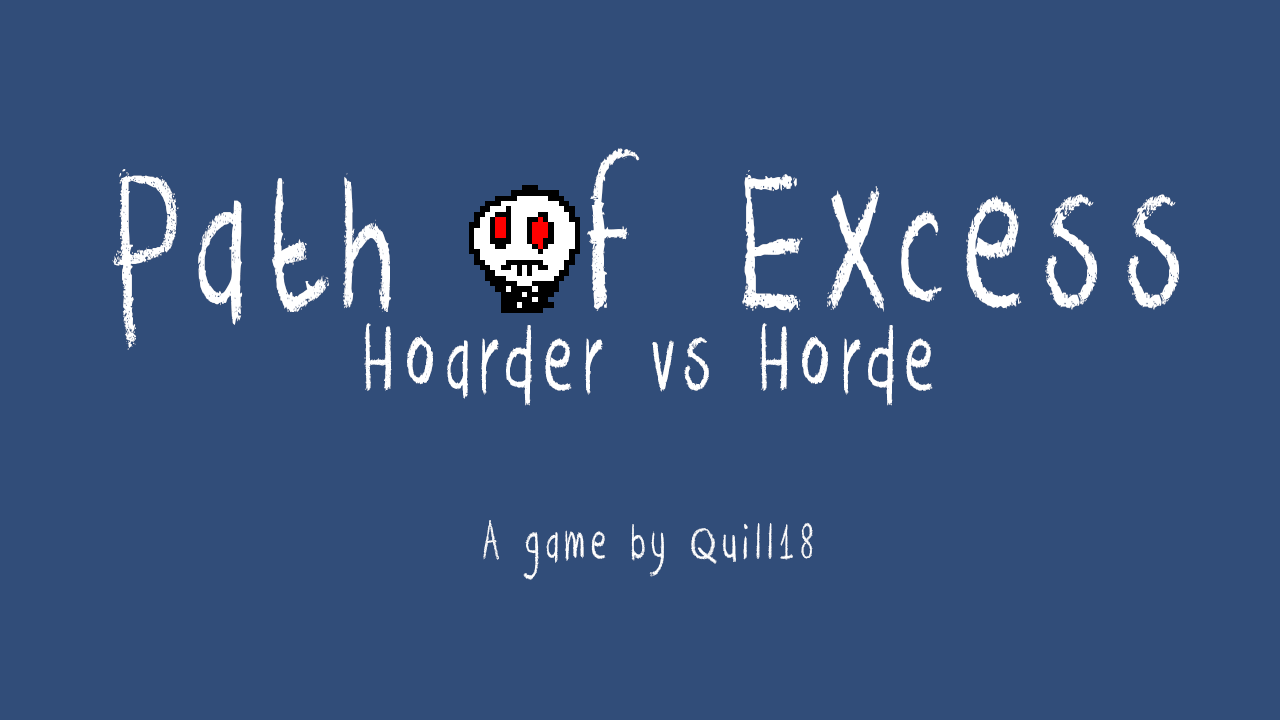
<style>
.page{position:relative;width:1280px;height:720px;background:#314d79}
.page>*{position:absolute;margin:0}
.t1{font:56.5px "DKCrayonCrumble";letter-spacing:0.159em;color:#ffffff;scale:0.64 1}
.t2{font:229.2px "DKCrayonCrumble";letter-spacing:0.159em;color:#ffffff;scale:0.64 1}
.t3{font:106.8px "DKCrayonCrumble";letter-spacing:0.159em;color:#ffffff;scale:0.64 1}
</style>
<div class="page">
<p class="t1" style="left:112px;top:148px;width:1068px;height:432px;text-align:center"><span class="t2">Path of Excess<br></span><span class="t3">Hoarder vs Horde<br><br></span><br>A game by Quill18</p>
</div>
